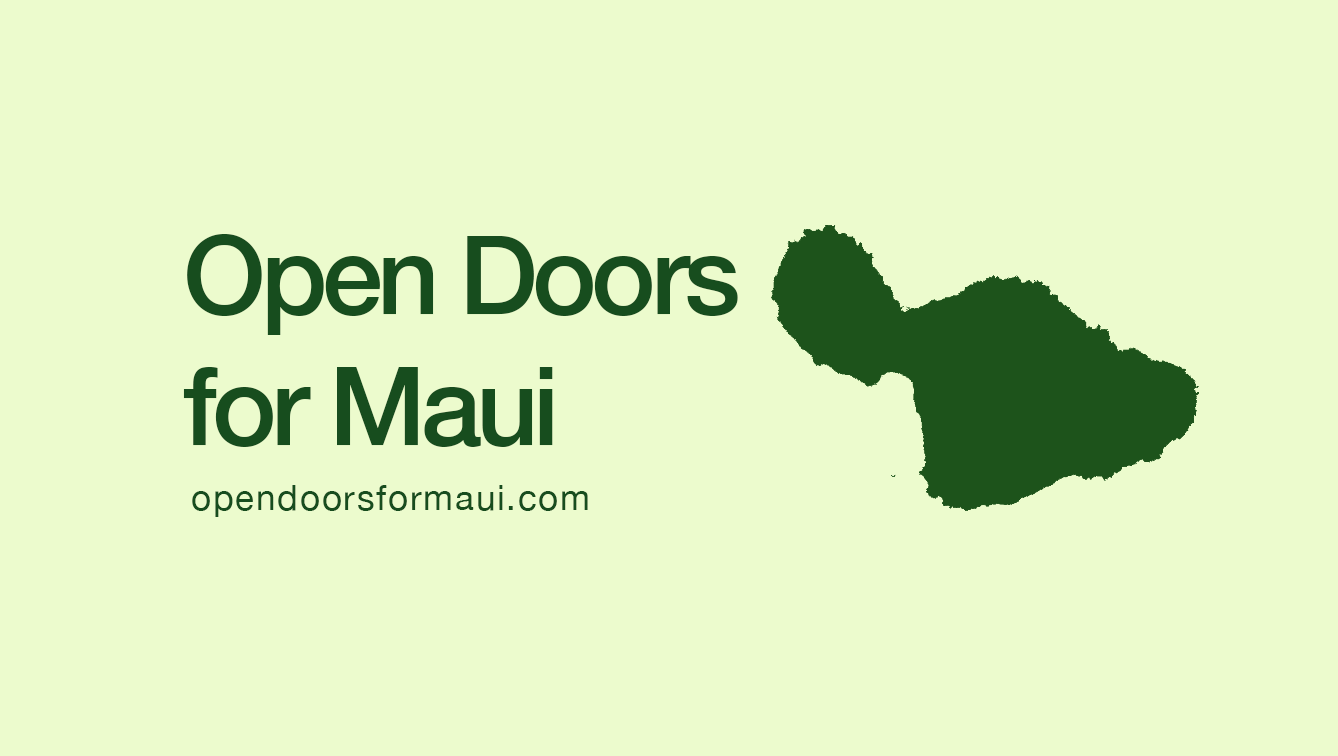
<style>
.page{position:relative;width:1338px;height:756px;background:#ecfbcd}
.page>*{position:absolute;margin:0}
.t1{font:109.1px "HelveticaNeue-Medium";letter-spacing:-0.05em;color:#174d1e}
.t2{font:35px "HelveticaNeue";letter-spacing:0.05em;color:#174d1e}
</style>
<div class="page">
<p class="t1" style="left:183px;top:234px;width:555px;height:213px">Open Doors<br>for Maui</p>
<p class="t2" style="left:192px;top:485px;width:396px;height:32px">opendoorsformaui.com</p>
</div>
